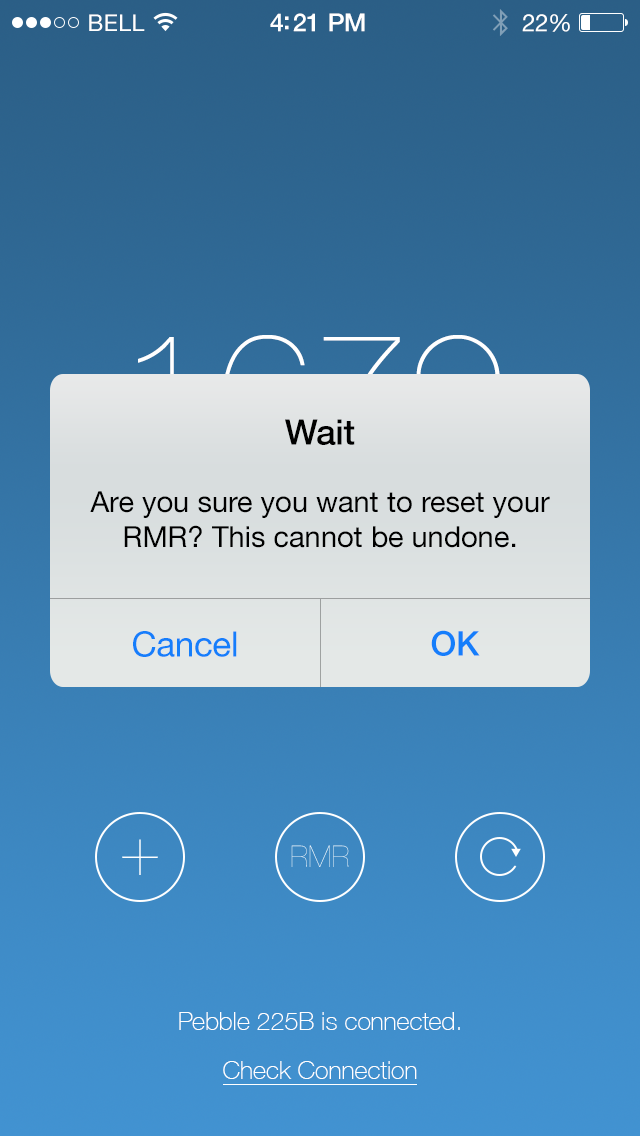
<style>
.page{position:relative;width:640px;height:1136px}
.page>*{position:absolute;margin:0}
.t1{font:23px "HelveticaNeue";letter-spacing:0.02em;color:#ffffff}
.t2{font:25px "HelveticaNeue-Medium";letter-spacing:-0.02em;color:#ffffff}
.t3{font:24px "HelveticaNeue";letter-spacing:-0.02em;color:#ffffff}
.t4{font:35px "HelveticaNeue-Medium";letter-spacing:-0.01em;color:#000000}
.t5{font:29px "HelveticaNeue";color:#000000}
.t6{font:34px "HelveticaNeue-Medium";letter-spacing:-0.01em;color:#157efb}
.t7{font:35px "HelveticaNeue";letter-spacing:-0.01em;color:#157efb}
.t8{font:25px "HelveticaNeue-Thin";color:#ffffff}
</style>
<div class="page">
<p class="t1" style="left:89px;top:14px;width:56px;height:17px">BELL</p>
<p class="t2" style="left:270px;top:13px;width:95px;height:19px">4:21 PM</p>
<p class="t3" style="left:522px;top:14px;width:48px;height:18px">22%</p>
<p class="t4" style="left:285px;top:419px;width:70px;height:26px">Wait</p>
<p class="t5" style="left:90px;top:491px;width:460px;height:57px;text-align:center">Are you sure you want to reset your<br>RMR? This cannot be undone.</p>
<p class="t6" style="left:431px;top:630px;width:49px;height:26px">OK</p>
<p class="t7" style="left:133px;top:631px;width:104px;height:26px">Cancel</p>
<p class="t8" style="left:179px;top:1012px;width:281px;height:18px">Pebble 225B is connected.</p>
<p class="t8" style="left:223px;top:1061px;width:194px;height:18px">Check Connection</p>
</div>
